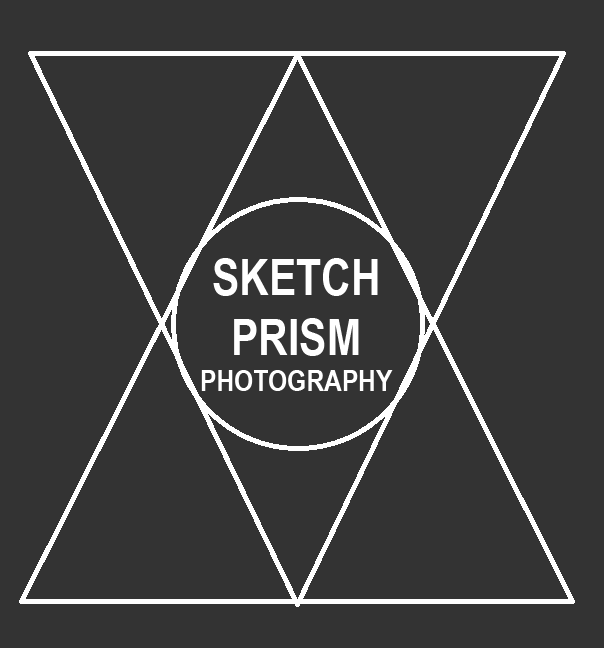
<style>
.page{position:relative;width:604px;height:648px;background:#333333}
.page>*{position:absolute;margin:0}
.t1{font:50px "ArialNarrow-Bold";color:#ffffff}
.t2{font:30px "ArialNarrow-Bold";color:#ffffff}
</style>
<div class="page">
<p class="t1" style="left:201px;top:258px;width:192px;height:133px;text-align:center">SKETCH<br>PRISM<br><span class="t2">PHOTOGRAPHY</span></p>
</div>
